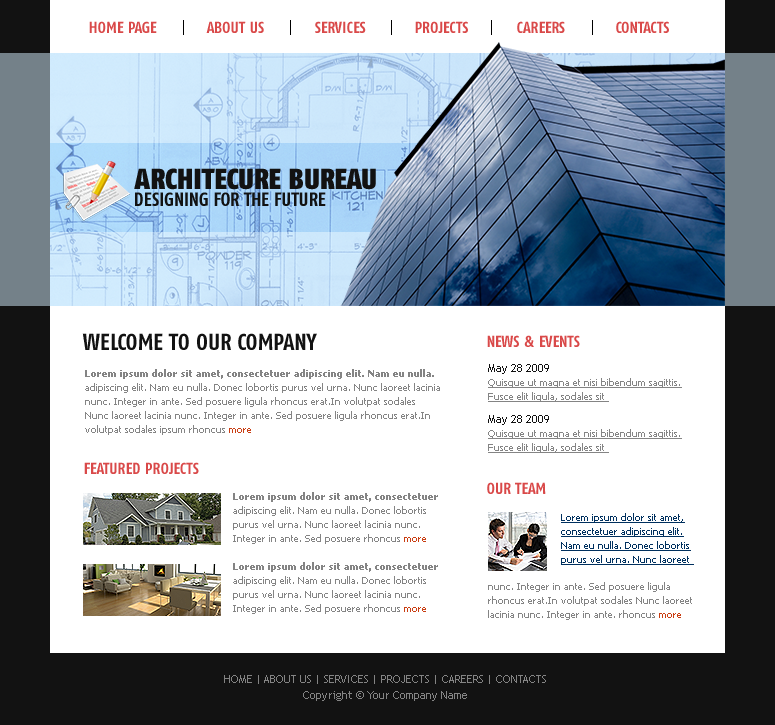
<style>
.page{position:relative;width:775px;height:725px;background:#ffffff}
.page>*{position:absolute;margin:0}
.t1{font:16px "FagoCo-Bold";color:#d94949}
.t2{font:29px "FagoCo-Black";color:#121212}
.t3{font:19px "FagoCo-Bold";color:#121212}
.t4{font:23px "FagoCo-Bold";color:#121212}
.t5{font:10px/14px "Tahoma";color:#848484;text-decoration:underline}
.t6{font:11px/14px "TrebuchetMS";color:#121212}
.t7{font:10px/14px "Tahoma";color:#848484}
.t8{font:10px/14px "Tahoma-Bold";color:#848484}
.t9{font:10px/14px "Tahoma";color:#c93e13}
.t10{font:10px/14px "Tahoma";color:#00305e;text-decoration:underline}
.t11{font:11px/16px "TrebuchetMS";color:#848484}
</style>
<div class="page">
<p class="t1" style="left:89px;top:21px;width:68px;height:12px">HOME PAGE</p>
<p class="t1" style="left:206px;top:21px;width:58px;height:12px">ABOUT US</p>
<p class="t1" style="left:315px;top:21px;width:51px;height:12px">SERVICES</p>
<p class="t1" style="left:415px;top:21px;width:53px;height:12px">PROJECTS</p>
<p class="t1" style="left:517px;top:21px;width:48px;height:12px">CAREERS</p>
<p class="t1" style="left:616px;top:21px;width:53px;height:12px">CONTACTS</p>
<p class="t2" style="left:134px;top:168px;width:242px;height:22px">ARCHITECURE BUREAU</p>
<p class="t3" style="left:135px;top:192px;width:191px;height:14px">DESIGNING FOR THE FUTURE</p>
<p class="t4" style="left:82px;top:333px;width:235px;height:17px">WELCOME TO OUR COMPANY</p>
<p class="t1" style="left:487px;top:335px;width:93px;height:12px">NEWS &amp; EVENTS</p>
<p class="t5" style="left:488px;top:364px;width:194px;height:38px"><span class="t6">May 28 2009<br></span>Quisque ut magna et nisi bibendum sagittis. Fusce elit ligula, sodales sit</p>
<p class="t7" style="left:85px;top:369px;width:355px;height:66px"><span class="t8">Lorem ipsum dolor sit amet, consectetuer adipiscing elit. Nam eu nulla. <br></span>adipiscing elit. Nam eu nulla. Donec lobortis purus vel urna. Nunc laoreet lacinia nunc. Integer in ante. Sed posuere ligula rhoncus erat.In volutpat sodales Nunc laoreet lacinia nunc. Integer in ante. Sed posuere ligula rhoncus erat.In volutpat sodales ipsum rhoncus <span class="t9">more</span></p>
<p class="t5" style="left:488px;top:415px;width:194px;height:38px"><span class="t6">May 28 2009<br></span>Quisque ut magna et nisi bibendum sagittis. Fusce elit ligula, sodales sit</p>
<p class="t1" style="left:84px;top:462px;width:115px;height:12px">FEATURED PROJECTS</p>
<p class="t1" style="left:487px;top:482px;width:59px;height:12px">OUR TEAM</p>
<p class="t7" style="left:233px;top:492px;width:205px;height:52px"><span class="t8">Lorem ipsum dolor sit amet, consectetuer <br></span>adipiscing elit. Nam eu nulla. Donec lobortis purus vel urna. Nunc laoreet lacinia nunc. Integer in ante. Sed posuere rhoncus <span class="t9">more</span></p>
<p class="t10" style="left:561px;top:513px;width:133px;height:52px">Lorem ipsum dolor sit amet, consectetuer adipiscing elit. Nam eu nulla. Donec lobortis purus vel urna. Nunc laoreet</p>
<p class="t7" style="left:233px;top:562px;width:205px;height:52px"><span class="t8">Lorem ipsum dolor sit amet, consectetuer <br></span>adipiscing elit. Nam eu nulla. Donec lobortis purus vel urna. Nunc laoreet lacinia nunc. Integer in ante. Sed posuere rhoncus <span class="t9">more</span></p>
<p class="t7" style="left:488px;top:582px;width:204px;height:38px">nunc. Integer in ante. Sed posuere ligula rhoncus erat.In volutpat sodales Nunc laoreet lacinia nunc. Integer in ante. rhoncus <span class="t9">more</span></p>
<p class="t11" style="left:224px;top:675px;width:322px;height:26px;text-align:center">HOME | ABOUT US | SERVICES | PROJECTS | CAREERS | CONTACTS<br>Copyright © Your Company Name</p>
</div>
